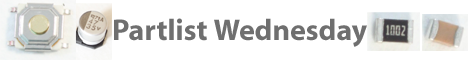
<style>
.page{position:relative;width:468px;height:60px;background:#ffffff}
.page>*{position:absolute;margin:0}
.t1{font:30.1px "Myriad-Bold";color:#6f6f6f}
</style>
<div class="page">
<p class="t1" style="left:114px;top:18px;width:253px;height:29px">Partlist Wednesday</p>
</div>
